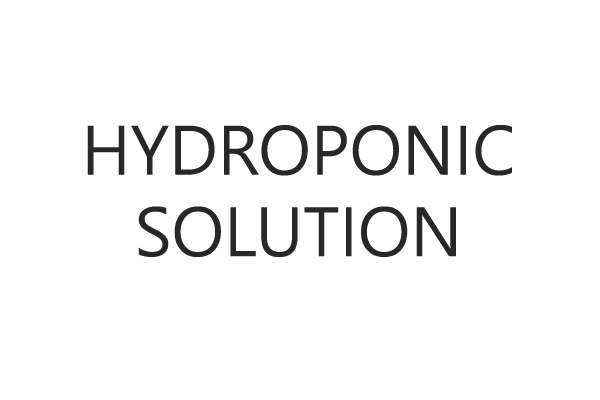
<style>
.page{position:relative;width:600px;height:400px;background:#ffffff}
.page>*{position:absolute;margin:0}
.t1{font:67.9px "MalgunGothic";color:#282828}
</style>
<div class="page">
<p class="t1" style="left:87px;top:125px;width:425px;height:132px;text-align:center">HYDROPONIC<br>SOLUTION</p>
</div>
